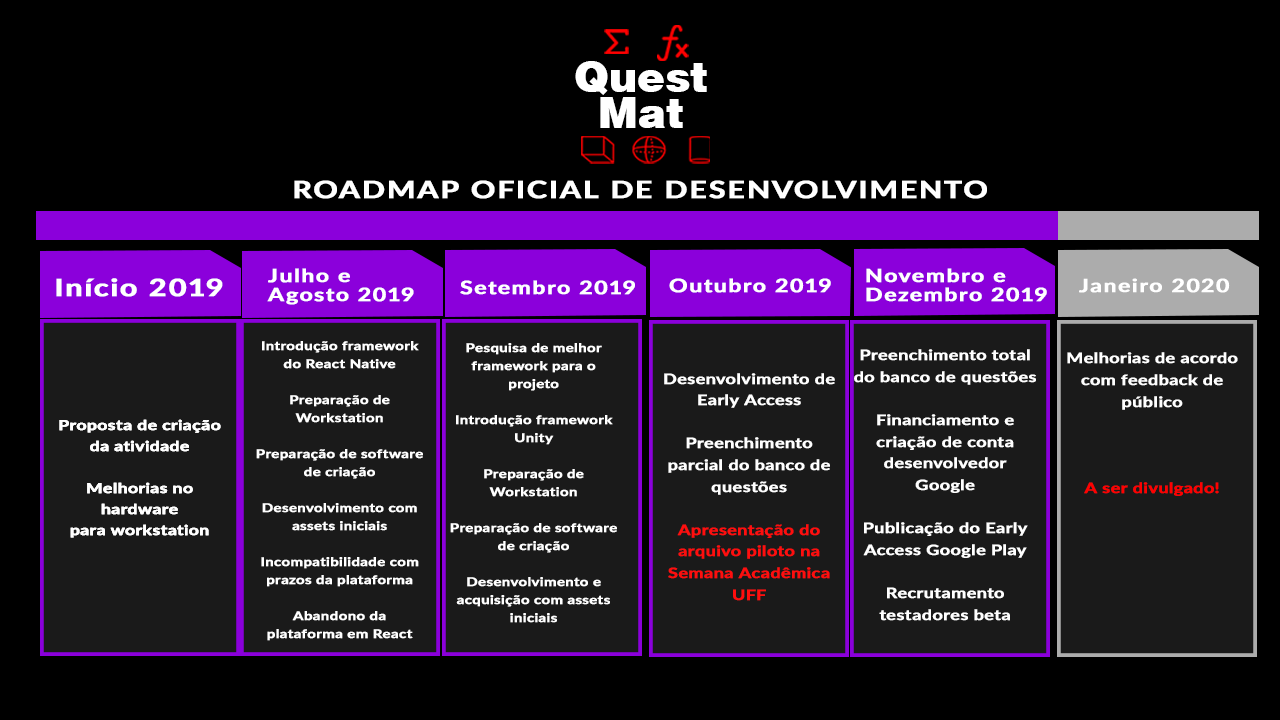
<style>
.page{position:relative;width:1280px;height:720px;background:#000000}
.page>*{position:absolute;margin:0}
.t1{font:42.1px/36.1px "HelveticaBlack";color:#ffffff}
.t2{font:24px "Lato-Bold";letter-spacing:0.05em;color:#ffffff;font-weight:bold;scale:1.25 1}
.t3{font:18.3px/18.3px "Lato-Bold";letter-spacing:0.05em;color:#ffffff;font-weight:bold;scale:1.25 1}
.t4{font:18.3px "Lato-Bold";letter-spacing:0.05em;color:#ffffff;font-weight:bold;scale:1.25 1}
.t5{font:12px "Lato-Bold";color:#ffffff;font-weight:bold;scale:1.25 1}
.t6{font:14.4px "Lato-Bold";color:#ffffff;font-weight:bold;scale:1.25 1}
.t7{font:14.4px "Lato-Bold";color:#ff0000;font-weight:bold;scale:1.25 1}
.t8{font:14.4px "Lato-Bold";color:#ff0e0e;font-weight:bold;scale:1.25 1}
.t9{font:14px "Lato-Bold";color:#ffffff;font-weight:bold;scale:1.25 1}
</style>
<div class="page">
<p class="t1" style="left:575px;top:61px;width:132px;height:67px;text-align:center">Quest<br>Mat</p>
<p class="t2" style="left:294px;top:180px;width:693px;height:19px">ROADMAP OFICIAL DE DESENVOLVIMENTO</p>
<p class="t3" style="left:267px;top:268px;width:147px;height:37px">Julho e <br>Agosto 2019</p>
<p class="t3" style="left:866px;top:268px;width:181px;height:34px">Novembro e <br>Dezembro 2019</p>
<p class="t2" style="left:56px;top:278px;width:167px;height:19px">Início 2019</p>
<p class="t4" style="left:460px;top:280px;width:175px;height:15px">Setembro 2019</p>
<p class="t4" style="left:669px;top:278px;width:162px;height:15px">Outubro 2019</p>
<p class="t4" style="left:1079px;top:278px;width:151px;height:15px">Janeiro 2020</p>
<p class="t5" style="left:256px;top:341px;width:167px;height:300px;text-align:center">Introdução framework<br>do React Native<br><br>Preparação de Workstation<br><br>Preparação de software de criação<br><br>Desenvolvimento com assets iniciais<br><br>Incompatibilidade com prazos da plataforma<br><br>Abandono da plataforma em React Native</p>
<p class="t5" style="left:450px;top:343px;width:167px;height:280px;text-align:center">Pesquisa de melhor framework para o projeto<br><br>Introdução framework Unity<br><br>Preparação de Workstation<br><br>Preparação de software de criação<br><br>Desenvolvimento e acquisição com assets iniciais</p>
<p class="t6" style="left:854px;top:349px;width:182px;height:272px;text-align:center">Preenchimento total do banco de questões <br><br>Financiamento e criação de conta desenvolvedor <br>Google<br><br>Publicação do Early Access Google Play<br><br>Recrutamento testadores beta</p>
<p class="t6" style="left:1067px;top:352px;width:171px;height:144px;text-align:center">Melhorias de acordo com feedback de público<br><br><br><br><span class="t7">A ser divulgado!</span></p>
<p class="t6" style="left:664px;top:373px;width:171px;height:228px;text-align:center">Desenvolvimento de Early Access<br><br>Preenchimento parcial do banco de questões<br><br><span class="t8">Apresentação do arquivo piloto na Semana Acadêmica UFF</span></p>
<p class="t9" style="left:59px;top:419px;width:162px;height:119px;text-align:center">Proposta de criação da atividade<br><br>Melhorias no hardware <br>para workstation</p>
<p class="t9" style="left:59px;top:419px;width:162px;height:119px;text-align:center">Proposta de criação da atividade<br><br>Melhorias no hardware <br>para workstation</p>
</div>
